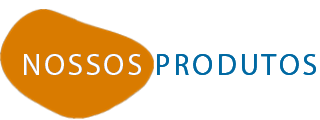
<style>
.page{position:relative;width:320px;height:120px;background:#ffffff}
.page>*{position:absolute;margin:0}
.t1{font:30px "MyriadPro-Regular";letter-spacing:0.1em}
.t2{font:30px "MyriadPro-Regular";letter-spacing:0.1em;color:#0069a3}
.t3{font:30px "MyriadPro-Regular";letter-spacing:0.1em;color:#ffffff}
</style>
<div class="page">
<p class="t1" style="left:24px;top:54px;width:292px;height:21px">NOSSOS PRODUTOS</p>
<p class="t2" style="left:24px;top:54px;width:292px;height:21px"><span class="t3">NOSSOS</span> PRODUTOS</p>
</div>
